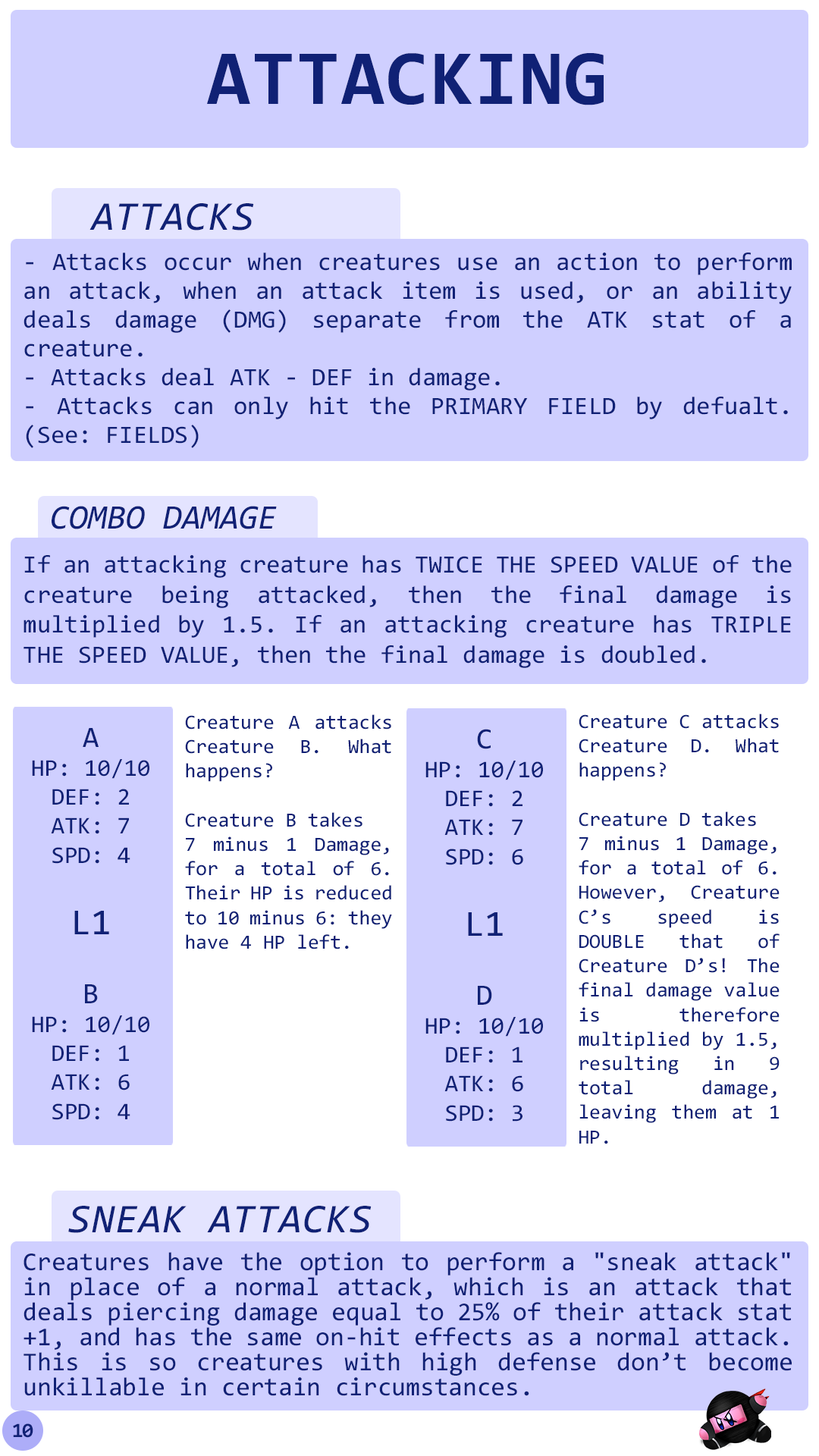
<style>
.page{position:relative;width:819px;height:1456px;background:#cfcfff}
.page>*{position:absolute;margin:0}
.t1{font:78.3px "Consolas-Bold";letter-spacing:0.02em;color:#102175}
.t2{font:41.1px "Consolas-Italic";letter-spacing:0.02em;color:#102175}
.t3{font:25px/28.8px "Consolas";color:#102175}
.t4{font:34.3px "Consolas-Italic";color:#102175}
.t5{font:25px "Consolas";color:#102175}
.t6{font:20.4px "Consolas";color:#102175}
.t7{font:24.1px "Consolas";color:#102175}
.t8{font:29.6px "Consolas";color:#102175}
.t9{font:37px "Consolas";color:#102175}
.t10{font:25.8px/25px "Consolas";color:#102175}
.t11{font:20.5px "Consolas-Bold";letter-spacing:-0.06em;color:#102175}
</style>
<div class="page">
<p class="t1" style="left:207px;top:53px;width:397px;height:52px">ATTACKING</p>
<p class="t2" style="left:89px;top:203px;width:165px;height:28px">ATTACKS</p>
<p class="t3" style="left:24px;top:253px;width:768px;height:195px;text-align:justify">- Attacks occur when creatures use an action to perform an attack, when an attack item is used, or an ability deals damage (DMG) separate from the ATK stat of a creature.<br>- Attacks deal ATK - DEF in damage.<br>- Attacks can only hit the PRIMARY FIELD by defualt. (See: FIELDS)</p>
<p class="t4" style="left:52px;top:506px;width:225px;height:23px">COMBO DAMAGE</p>
<p class="t5" style="left:24px;top:555px;width:768px;height:113px;text-align:justify">If an attacking creature has TWICE THE SPEED VALUE of the creature being attacked, then the final damage is multiplied by 1.5. If an attacking creature has TRIPLE THE SPEED VALUE, then the final damage is doubled.</p>
<p class="t6" style="left:579px;top:714px;width:201px;height:430px;text-align:justify">Creature C attacks Creature D. What happens?<br><br>Creature D takes <br>7 minus 1 Damage, for a total of 6. However, Creature C’s speed is DOUBLE that of Creature D’s! The final damage value is therefore multiplied by 1.5, resulting in 9 total damage, leaving them at 1 HP.</p>
<p class="t6" style="left:185px;top:714px;width:207px;height:235px;text-align:justify">Creature A attacks Creature B. What happens?<br><br>Creature B takes <br>7 minus 1 Damage, for a total of 6. Their HP is reduced to 10 minus 6: they have 4 HP left.</p>
<p class="t7" style="left:32px;top:728px;width:117px;height:136px;text-align:center"><span class="t8">A<br></span>HP: 10/10<br>DEF: 2<br>ATK: 7<br>SPD: 4</p>
<p class="t7" style="left:425px;top:729px;width:118px;height:136px;text-align:center"><span class="t8">C<br></span>HP: 10/10<br>DEF: 2<br>ATK: 7<br>SPD: 6</p>
<p class="t9" style="left:74px;top:911px;width:35px;height:23px">L1</p>
<p class="t9" style="left:468px;top:912px;width:35px;height:24px">L1</p>
<p class="t7" style="left:32px;top:984px;width:117px;height:136px;text-align:center"><span class="t8">B<br></span>HP: 10/10<br>DEF: 1<br>ATK: 6<br>SPD: 4</p>
<p class="t7" style="left:425px;top:986px;width:118px;height:136px;text-align:center"><span class="t8">D<br></span>HP: 10/10<br>DEF: 1<br>ATK: 6<br>SPD: 3</p>
<p class="t2" style="left:68px;top:1206px;width:304px;height:27px">SNEAK ATTACKS</p>
<p class="t10" style="left:24px;top:1252px;width:768px;height:144px;text-align:justify">Creatures have the option to perform a "sneak attack" in place of a normal attack, which is an attack that deals piercing damage equal to 25% of their attack stat +1, and has the same on-hit effects as a normal attack. This is so creatures with high defense don’t become unkillable in certain circumstances.</p>
<p class="t11" style="left:13px;top:1423px;width:20px;height:15px">10</p>
</div>
